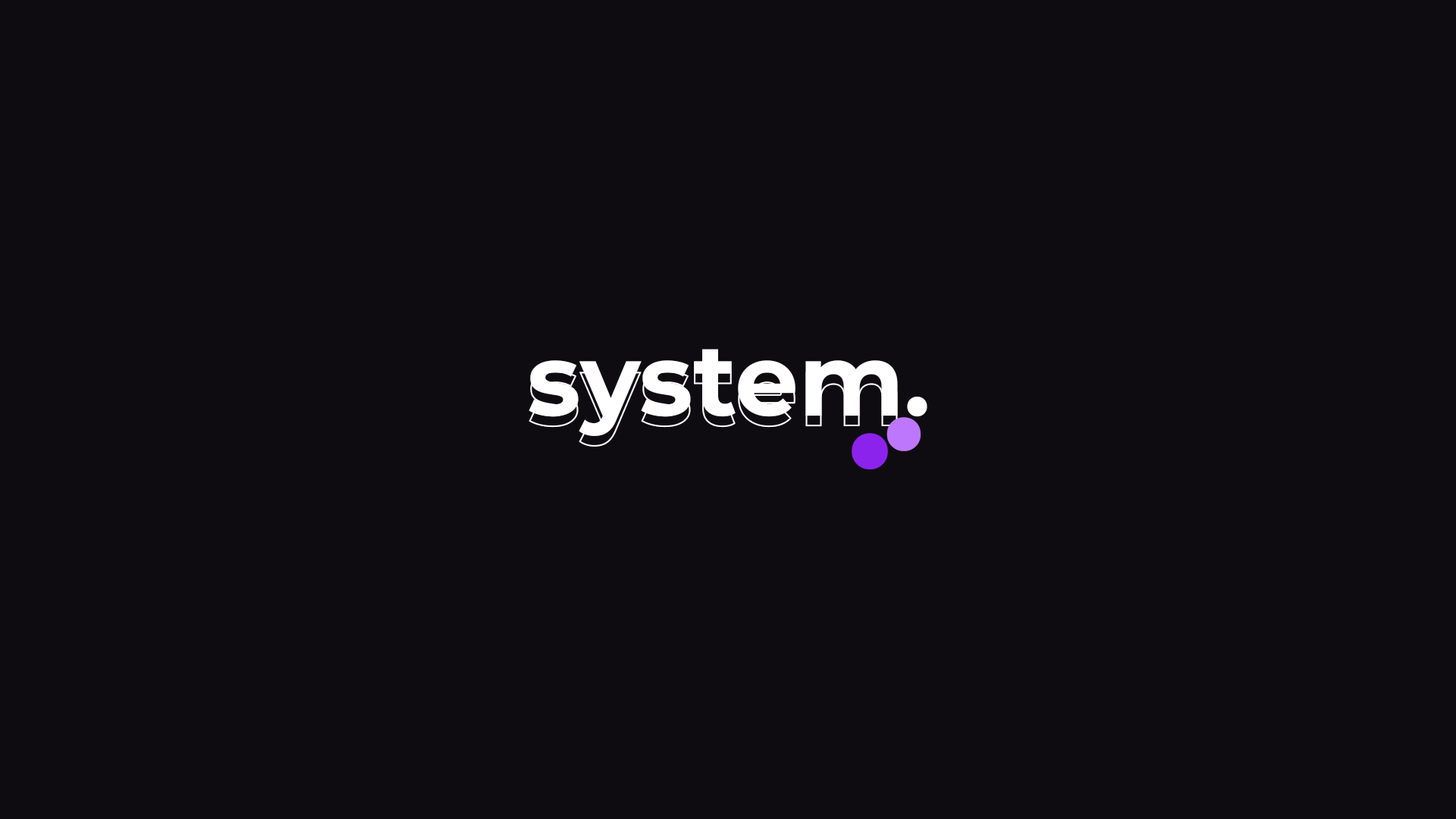
<style>
.page{position:relative;width:1456px;height:819px;background:#0f0c11}
.page>*{position:absolute;margin:0}
.t1{font:100.6px "Montserrat-Bold";color:#ffffff}
.t2{font:100.6px "Montserrat-Bold"}
.t3{font:173.1px "Montserrat-Bold";color:#bd77fd}
.t4{font:184.7px "Montserrat-Bold";color:#8c23ed}
</style>
<div class="page">
<p class="t1" style="left:529px;top:349px;width:398px;height:87px">system.</p>
<p class="t2" style="left:529px;top:359px;width:369px;height:88px">system</p>
<p class="t3" style="left:886px;top:417px;width:35px;height:34px">.</p>
<p class="t4" style="left:852px;top:433px;width:36px;height:36px">.</p>
</div>
